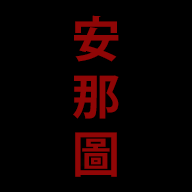
<style>
.page{position:relative;width:192px;height:192px;background:#000000}
.page>*{position:absolute;margin:0}
.t1{font:48px "KozGoPr6N-Bold";letter-spacing:0.1em;color:#900606}
</style>
<div class="page">
<p class="t1" style="left:73px;top:15px;width:46px;height:162px">安<br>那<br>圖</p>
</div>
